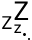
<style>
.page{position:relative;width:32px;height:40px;background:#ffffff}
.page>*{position:absolute;margin:0}
.t1{font:26px "Roboto-Regular";color:#000000}
.t2{font:18px "Roboto-Regular";color:#000000}
.t3{font:16px "Roboto-Regular";color:#000000}
</style>
<div class="page">
<p class="t1" style="left:14px;top:1px;width:15px;height:19px">Z</p>
<p class="t2" style="left:2px;top:16px;width:10px;height:13px">Z</p>
<p class="t3" style="left:14px;top:24px;width:8px;height:9px">z</p>
</div>
